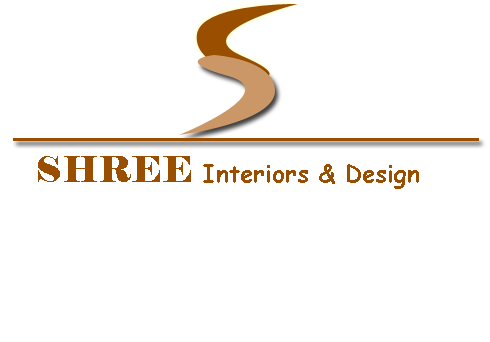
<style>
.page{position:relative;width:490px;height:342px;background:#ffffff}
.page>*{position:absolute;margin:0}
.t1{font:24px "ComicSansMS-Bold";color:#9a4e00}
.t2{font:36px "Elephant-Regular";color:#9a4e00}
</style>
<div class="page">
<p class="t1" style="left:38px;top:156px;width:381px;height:33px"><span class="t2">SHREE </span>Interiors &amp; Design</p>
</div>
